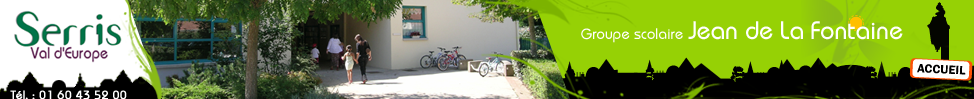
<style>
.page{position:relative;width:974px;height:99px;background:#96d105}
.page>*{position:absolute;margin:0}
.t1{font:25px "DynameSSK";color:#ffffff}
.t2{font:15px "DynameSSK";color:#ffffff}
.t3{font:11.8px "DynameSSK";color:#ffffff;font-weight:bold}
</style>
<div class="page">
<p class="t1" style="left:581px;top:21px;width:322px;height:22px"><span class="t2">Groupe scolaire </span>Jean de La Fontaine</p>
<p class="t3" style="left:10px;top:90px;width:117px;height:10px">Tél. : 01 60 43 52 00</p>
</div>
